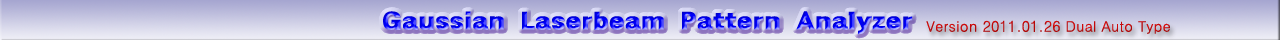
<style>
.page{position:relative;width:1280px;height:40px}
.page>*{position:absolute;margin:0}
.t1{font:24px "GothicXB-HM";scale:1.25 1}
.t2{font:14.4px "H2gtrM";color:#c80808}
</style>
<div class="page">
<p class="t1" style="left:383px;top:11px;width:530px;height:24px">Gaussian Laserbeam Pattern Analyzer</p>
<p class="t2" style="left:926px;top:19px;width:245px;height:15px">Version 2011.01.26 Dual Auto Type</p>
</div>
